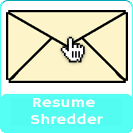
<style>
.page{position:relative;width:133px;height:133px;background:#fdf5c9}
.page>*{position:absolute;margin:0}
.t1{font:13.7px "HammersmithOne-Regular";color:#fafcfc;scale:1.27 1}
</style>
<div class="page">
<p class="t1" style="left:31px;top:98px;width:72px;height:26px;text-align:center">Resume <br>Shredder</p>
</div>
